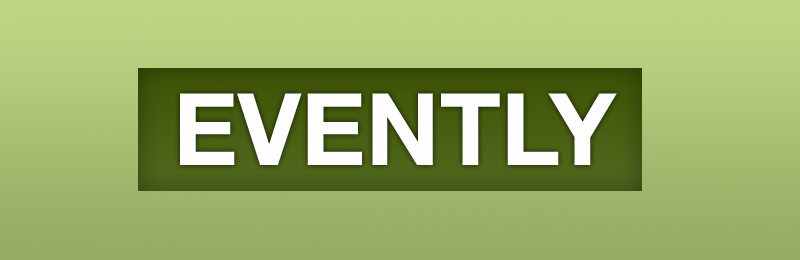
<style>
.page{position:relative;width:800px;height:260px}
.page>*{position:absolute;margin:0}
.t1{font:100px "HelveticaNeue-Bold";color:#fefefe}
</style>
<div class="page">
<p class="t1" style="left:180px;top:93px;width:437px;height:72px">EVENTLY</p>
</div>
